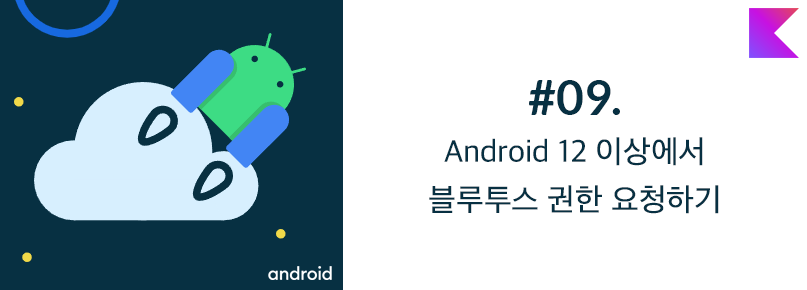
<style>
.page{position:relative;width:807px;height:290px;background:#ffffff}
.page>*{position:absolute;margin:0}
.t1{font:32px/48px "AppleSDGothicNeoM00";color:#073042}
.t2{font:48px/48px "Lato-Bold";color:#073042}
</style>
<div class="page">
<p class="t1" style="left:429px;top:80px;width:290px;height:134px;text-align:center"><span class="t2">#09.<br></span>Android 12 이상에서<br>블루투스 권한 요청하기</p>
</div>
